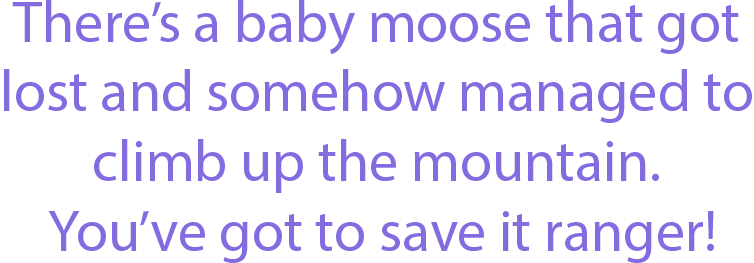
<style>
.page{position:relative;width:754px;height:263px;background:#ffffff}
.page>*{position:absolute;margin:0}
.t1{font:58.3px "MyriadPro-Regular";color:#856be0}
</style>
<div class="page">
<p class="t1" style="left:4px;top:0px;width:748px;height:263px;text-align:center">There’s a baby moose that got <br>lost and somehow managed to <br>climb up the mountain. <br>You’ve got to save it ranger!</p>
</div>
